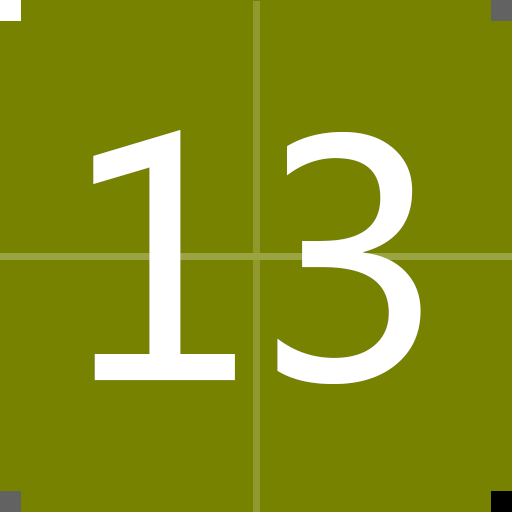
<style>
.page{position:relative;width:512px;height:512px;background:#778300}
.page>*{position:absolute;margin:0}
.t1{font:323.1px "MicrosoftYaHei";color:#ffffff}
</style>
<div class="page">
<p class="t1" style="left:93px;top:130px;width:328px;height:254px">13</p>
</div>
